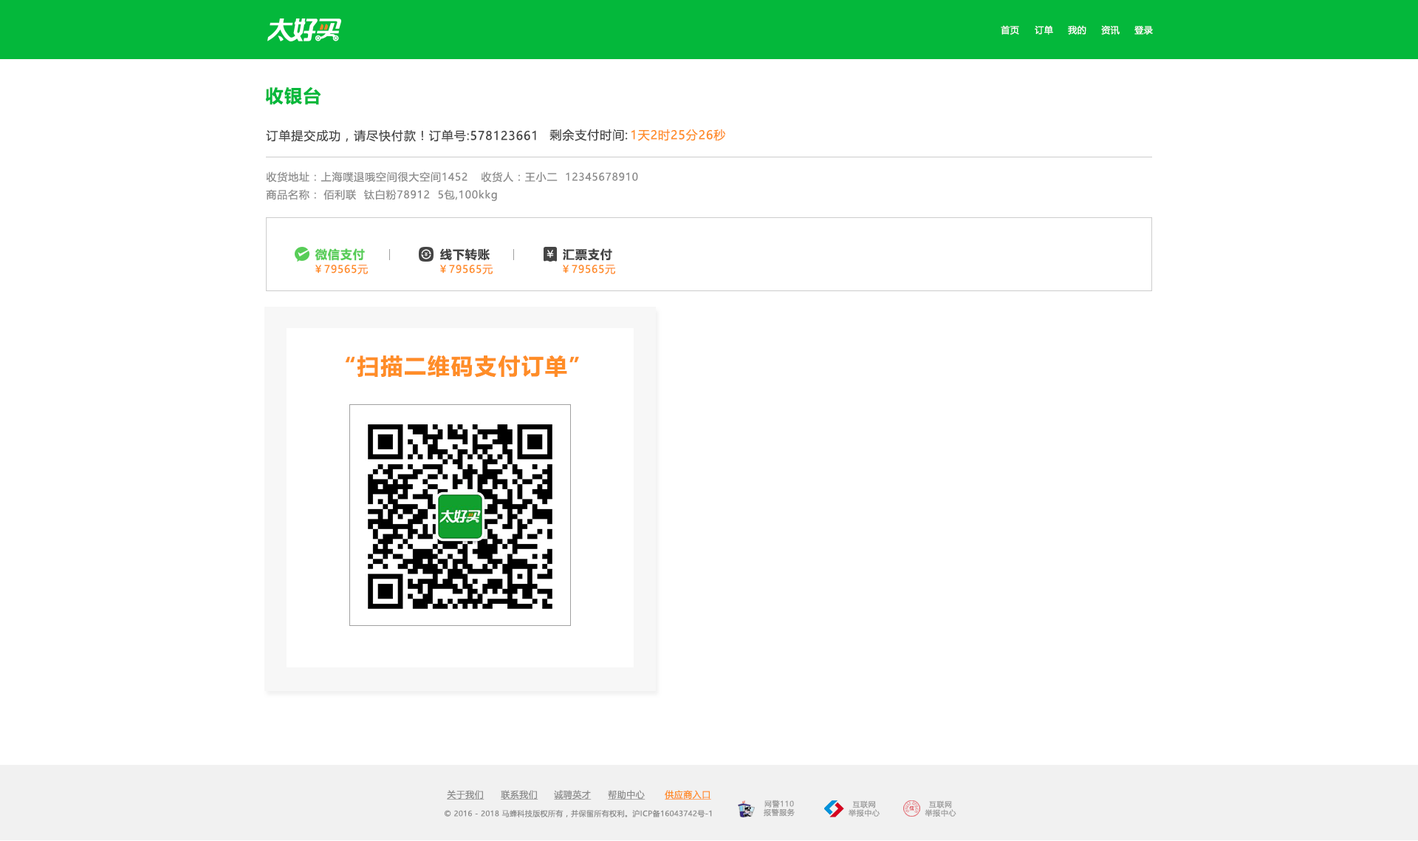
<style>
.page{position:relative;width:1418px;height:841px;background:#ffffff}
.page>*{position:absolute;margin:0}
.t1{font:8.9px "MicrosoftYaHeiUI";letter-spacing:0.04em;color:#ffffff}
.t2{font:17.7px "MicrosoftYaHeiUI-Bold";letter-spacing:0.06em;color:#04b83b}
.t3{font:11.8px "MicrosoftYaHeiUI";letter-spacing:0.06em;color:#444444}
.t4{font:11.8px "MicrosoftYaHeiUI";letter-spacing:0.06em;color:#ff8d27}
.t5{font:10.3px "MicrosoftYaHeiUI";letter-spacing:0.06em;color:#8c8c8c}
.t6{font:11.8px "MicrosoftYaHeiUI-Bold";letter-spacing:0.06em;color:#58cd58}
.t7{font:11.8px "MicrosoftYaHeiUI-Bold";letter-spacing:0.06em;color:#444444}
.t8{font:10.3px "MicrosoftYaHeiUI";letter-spacing:0.06em;color:#ff8d27}
.t9{font:22.2px "MicrosoftYaHeiUI-Bold";letter-spacing:0.06em;color:#ff8d27}
.t10{font:8.9px "MicrosoftYaHeiUI";letter-spacing:0.04em;color:#8c8c8c;text-decoration:underline}
.t11{font:8.9px "MicrosoftYaHeiUI";letter-spacing:0.04em;color:#ff8b25;text-decoration:underline}
.t12{font:7.4px "MicrosoftYaHeiUI";letter-spacing:0.04em;color:#8c8c8c}
.t13{font:7.4px/8.6px "MicrosoftYaHei";letter-spacing:0.06em;color:#999999}
</style>
<div class="page">
<p class="t1" style="left:1001px;top:25px;width:18px;height:10px">首页</p>
<p class="t1" style="left:1035px;top:25px;width:18px;height:10px">订单</p>
<p class="t1" style="left:1068px;top:25px;width:19px;height:10px">我的</p>
<p class="t1" style="left:1101px;top:25px;width:19px;height:10px">资讯</p>
<p class="t1" style="left:1135px;top:26px;width:18px;height:9px">登录</p>
<p class="t2" style="left:265px;top:86px;width:56px;height:19px">收银台</p>
<p class="t3" style="left:266px;top:129px;width:270px;height:13px">订单提交成功，请尽快付款！订单号:578123661</p>
<p class="t3" style="left:550px;top:129px;width:78px;height:12px">剩余支付时间:</p>
<p class="t4" style="left:632px;top:129px;width:94px;height:12px">1天2时25分26秒</p>
<p class="t5" style="left:266px;top:171px;width:202px;height:11px">收货地址：上海噗退哦空间很大空间1452</p>
<p class="t5" style="left:481px;top:171px;width:157px;height:11px">收货人：王小二  12345678910</p>
<p class="t5" style="left:266px;top:189px;width:50px;height:11px">商品名称：</p>
<p class="t5" style="left:324px;top:189px;width:173px;height:12px">佰利联  钛白粉78912  5包,100kkg</p>
<p class="t6" style="left:315px;top:248px;width:50px;height:13px">微信支付</p>
<p class="t7" style="left:440px;top:248px;width:50px;height:13px">线下转账</p>
<p class="t7" style="left:563px;top:248px;width:49px;height:13px">汇票支付</p>
<p class="t8" style="left:315px;top:264px;width:53px;height:11px">￥79565元</p>
<p class="t8" style="left:440px;top:264px;width:53px;height:11px">￥79565元</p>
<p class="t8" style="left:563px;top:264px;width:52px;height:11px">￥79565元</p>
<p class="t9" style="left:345px;top:355px;width:234px;height:22px">“扫描二维码支付订单”</p>
<p class="t10" style="left:447px;top:790px;width:38px;height:9px">关于我们</p>
<p class="t10" style="left:501px;top:790px;width:38px;height:9px">联系我们</p>
<p class="t10" style="left:554px;top:790px;width:38px;height:9px">诚聘英才</p>
<p class="t10" style="left:608px;top:790px;width:38px;height:9px">帮助中心</p>
<p class="t11" style="left:665px;top:790px;width:46px;height:9px">供应商入口</p>
<p class="t12" style="left:445px;top:809px;width:267px;height:8px">© 2016 - 2018 马蜂科技版权所有，并保留所有权利。沪ICP备16043742号-1</p>
<p class="t13" style="left:764px;top:799px;width:31px;height:17px;text-align:center">网警110<br>报警服务</p>
<p class="t13" style="left:849px;top:800px;width:31px;height:16px;text-align:center">互联网<br>举报中心</p>
<p class="t13" style="left:925px;top:800px;width:32px;height:16px;text-align:center">互联网<br>举报中心</p>
</div>
